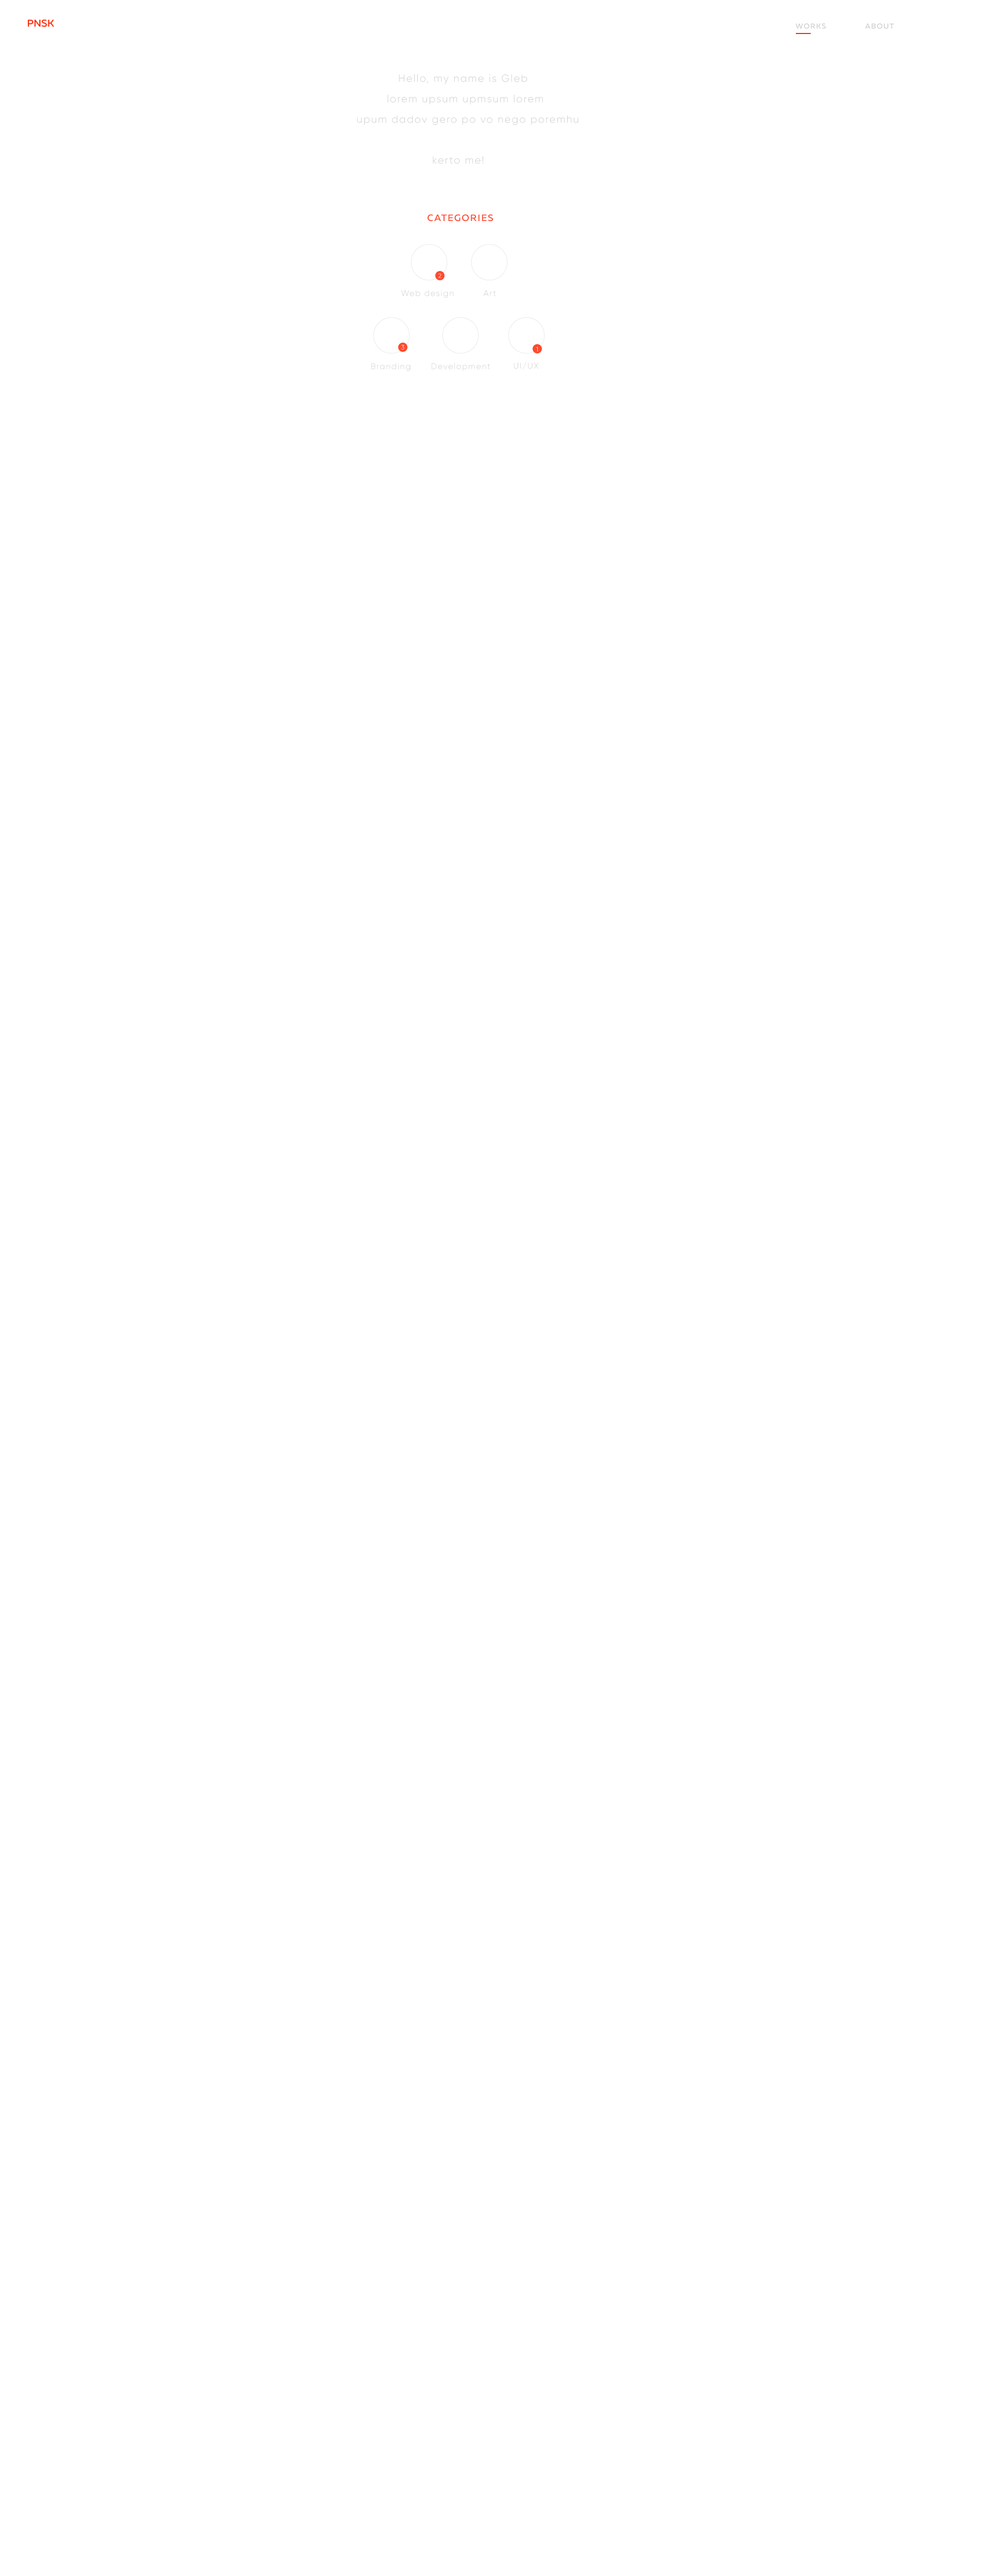
<style>
.page{position:relative;width:989px;height:2576px;background:#ffffff}
.page>*{position:absolute;margin:0}
.t1{font:7.2px "MullerMedium";letter-spacing:0.1em;color:#cfcfcf}
.t2{font:10.3px/20.4px "Gilroy-Light";letter-spacing:0.1em;color:#cfcfcf}
.t3{font:9.3px "MullerMedium";letter-spacing:0.1em;color:#ff4a2e}
.t4{font:6.2px "Gilroy-Light";letter-spacing:0.1em}
.t5{font:8.2px "Gilroy-Light";letter-spacing:0.1em;color:#cfcfcf}
</style>
<div class="page">
<p class="t1" style="left:795px;top:23px;width:31px;height:6px">WORKS</p>
<p class="t1" style="left:865px;top:23px;width:29px;height:6px">ABOUT</p>
<p class="t2" style="left:357px;top:74px;width:222px;height:90px">Hello, my name is Gleb<br>        lorem upsum upmsum lorem<br>upum dadov gero po vo nego poremhu<br><br>                    kerto me!</p>
<p class="t3" style="left:428px;top:214px;width:66px;height:8px">CATEGORIES</p>
<p class="t4" style="left:438px;top:273px;width:4px;height:5px">2</p>
<p class="t5" style="left:401px;top:290px;width:53px;height:8px">Web design</p>
<p class="t5" style="left:483px;top:290px;width:13px;height:6px">Art</p>
<p class="t4" style="left:401px;top:345px;width:3px;height:5px">3</p>
<p class="t4" style="left:536px;top:347px;width:2px;height:5px">1</p>
<p class="t5" style="left:371px;top:363px;width:40px;height:8px">Branding</p>
<p class="t5" style="left:432px;top:363px;width:58px;height:8px">Development</p>
<p class="t5" style="left:514px;top:362px;width:24px;height:7px">UI/UX</p>
</div>
